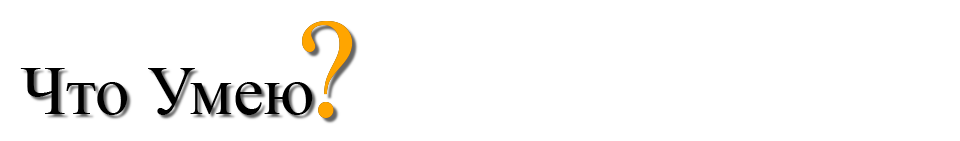
<style>
.page{position:relative;width:960px;height:141px;background:#ffffff}
.page>*{position:absolute;margin:0}
.t1{font:138.6px "TimesNewRomanPSMT";color:#ffa500}
.t2{font:69px "TimesNewRomanPSMT";color:#000000}
</style>
<div class="page">
<p class="t1" style="left:302px;top:21px;width:51px;height:97px">?</p>
<p class="t1" style="left:302px;top:21px;width:51px;height:97px">?</p>
<p class="t2" style="left:20px;top:68px;width:293px;height:47px">Что Умею</p>
</div>
